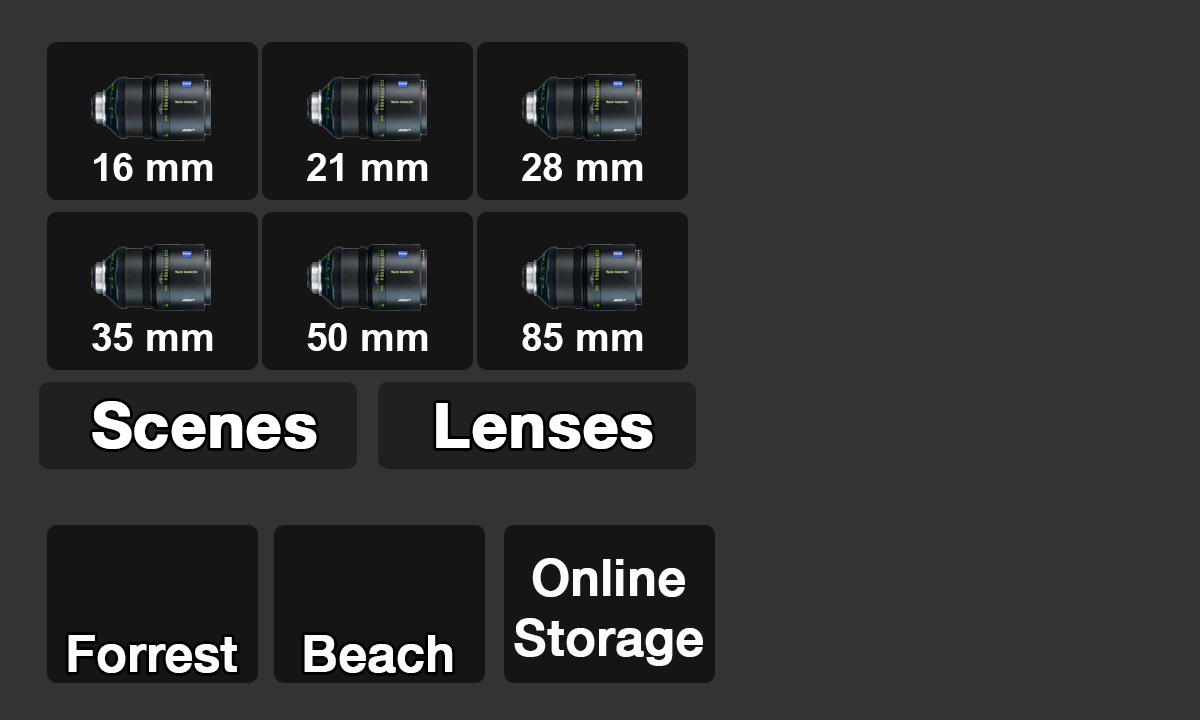
<style>
.page{position:relative;width:1200px;height:720px;background:#333333}
.page>*{position:absolute;margin:0}
.t1{font:39px "Arial-BoldMT";color:#ffffff}
.t2{font:62px "HelveticaNeue-Bold";color:#ffffff;font-weight:bold}
.t3{font:50px "HelveticaNeue-Medium";color:#fcfcfc;font-weight:bold}
</style>
<div class="page">
<p class="t1" style="left:94px;top:153px;width:119px;height:28px">16 mm</p>
<p class="t1" style="left:307px;top:153px;width:121px;height:28px">21 mm</p>
<p class="t1" style="left:522px;top:153px;width:121px;height:28px">28 mm</p>
<p class="t1" style="left:92px;top:323px;width:121px;height:28px">35 mm</p>
<p class="t1" style="left:307px;top:323px;width:121px;height:28px">50 mm</p>
<p class="t1" style="left:522px;top:323px;width:121px;height:28px">85 mm</p>
<p class="t2" style="left:92px;top:401px;width:225px;height:48px">Scenes</p>
<p class="t2" style="left:436px;top:403px;width:217px;height:46px">Lenses</p>
<p class="t3" style="left:514px;top:558px;width:189px;height:108px;text-align:center">Online<br>Storage</p>
<p class="t3" style="left:68px;top:635px;width:169px;height:38px">Forrest</p>
<p class="t3" style="left:304px;top:635px;width:149px;height:38px">Beach</p>
</div>
